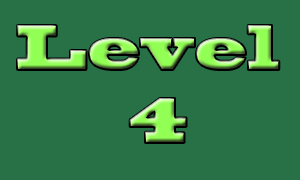
<style>
.page{position:relative;width:300px;height:180px;background:#287146}
.page>*{position:absolute;margin:0}
.t1{font:60.4px "BlackoakStd";scale:0.66 1}
</style>
<div class="page">
<p class="t1" style="left:17px;top:25px;width:263px;height:118px;text-align:center">Level <br>4</p>
</div>
